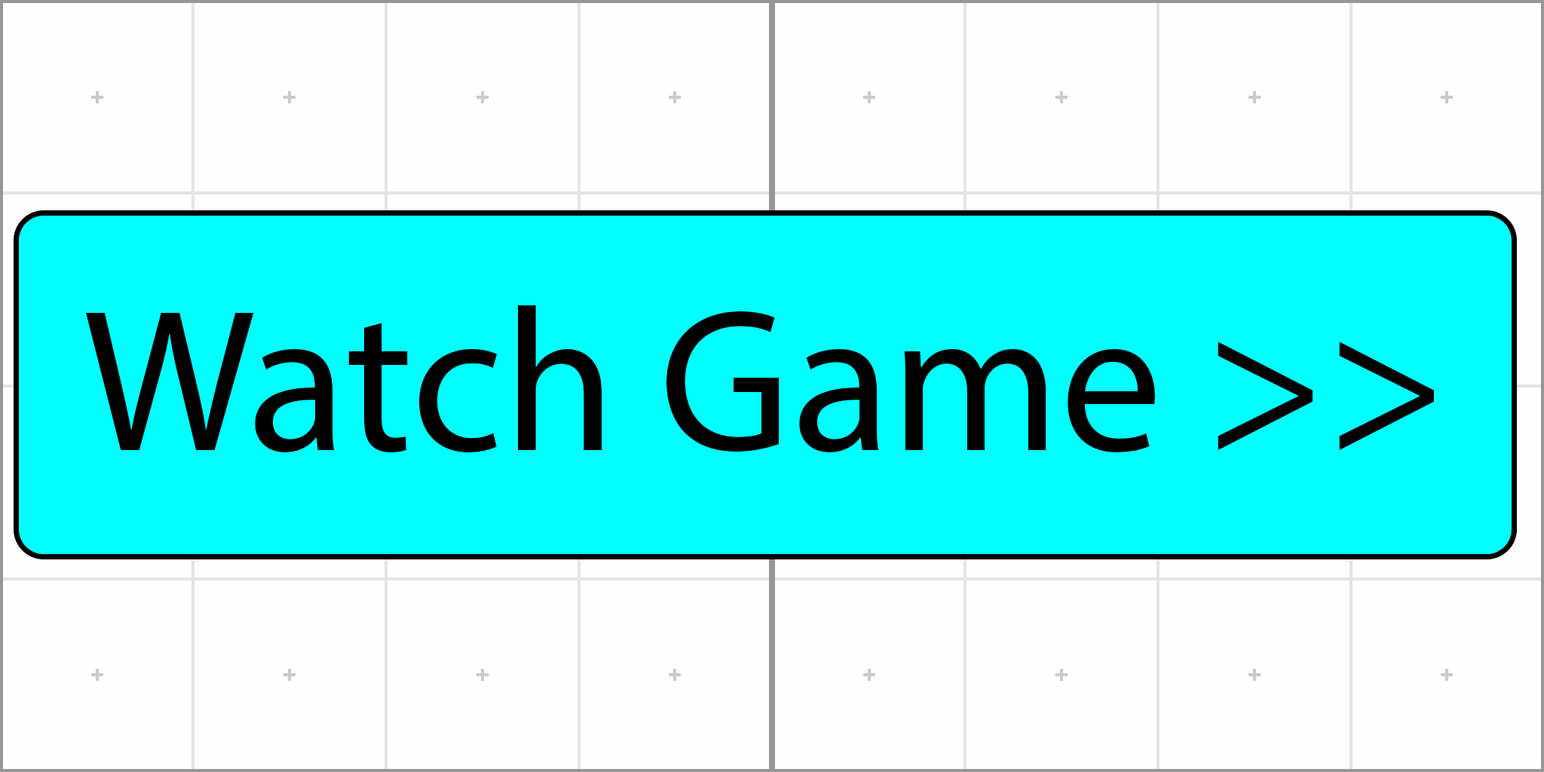
<style>
.page{position:relative;width:1544px;height:772px;background:#fefefe}
.page>*{position:absolute;margin:0}
.t1{font:203.6px "MyriadPro-Regular";color:#000000}
</style>
<div class="page">
<p class="t1" style="left:86px;top:305px;width:1348px;height:148px">Watch Game &gt;&gt;</p>
</div>
